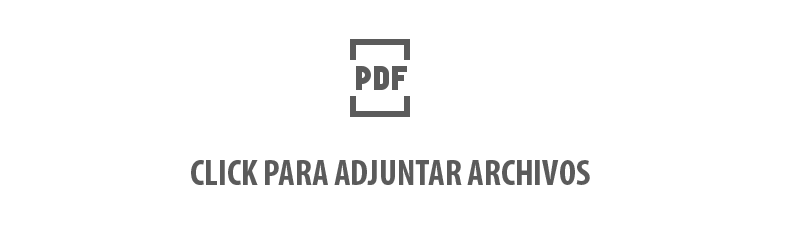
<style>
.page{position:relative;width:809px;height:251px;background:#ffffff}
.page>*{position:absolute;margin:0}
.t1{font:36px "MyriadPro-BoldCond";color:#5b5b5b}
</style>
<div class="page">
<p class="t1" style="left:191px;top:160px;width:399px;height:25px">CLICK PARA ADJUNTAR ARCHIVOS</p>
</div>
